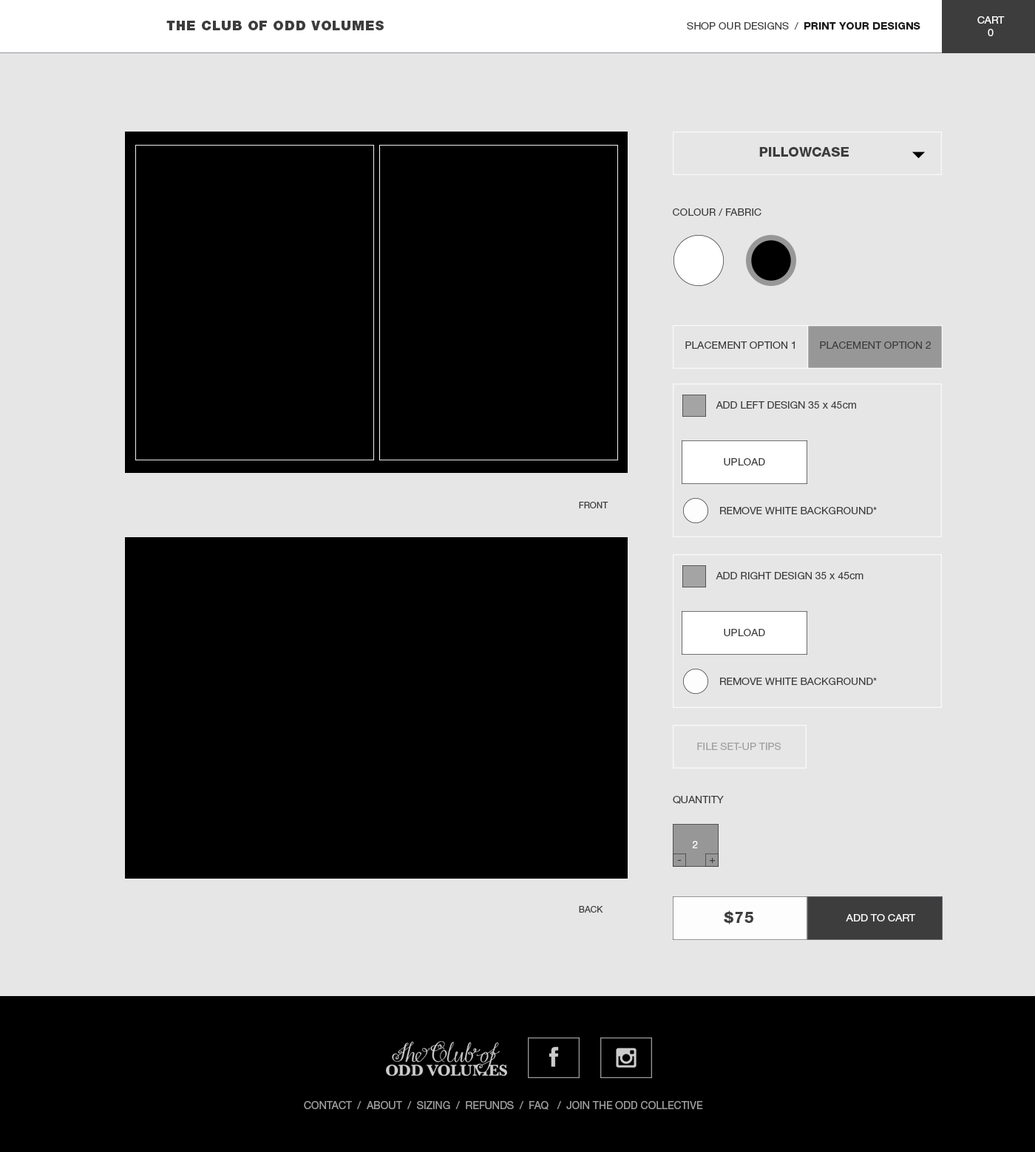
<style>
.page{position:relative;width:1035px;height:1152px;background:#e6e6e6}
.page>*{position:absolute;margin:0}
.t1{font:10.3px "HelveticaNeueLTStd-Roman";color:#ffffff}
.t2{font:13.3px "HelveticaNeueLTStd-Blk";letter-spacing:0.05em;color:#3d3d3d}
.t3{font:10.3px "HelveticaNeueLTStd-Roman";color:#3d3d3d}
.t4{font:10.3px "HelveticaNeueLTStd-Hv";color:#1b1b1b}
.t5{font:13.3px "HelveticaNeueLTStd-Hv";color:#3d3d3d}
.t6{font:10.3px "HelveticaNeueLTStd-Roman";color:#3e3e3e}
.t7{font:8.9px "HelveticaNeueLTStd-Roman";color:#3e3e3e}
.t8{font:10.3px "HelveticaNeueLTStd-Roman";color:#a0a0a0}
.t9{font:10.1px "HelveticaNeueLTStd-Roman";color:#ffffff}
.t10{font:10.1px "HelveticaNeueLTStd-Roman";color:#3e3e3e}
.t11{font:14.8px "HelveticaNeueLTStd-Hv";letter-spacing:0.05em;color:#3d3d3d}
.t12{font:10.3px "HelveticaNeueLTStd-Roman";color:#faf9f9}
.t13{font:10.6px "HelveticaNeueLTStd-Roman";color:#9b9b9b}
</style>
<div class="page">
<p class="t1" style="left:977px;top:16px;width:27px;height:20px;text-align:center">CART<br>0</p>
<p class="t2" style="left:166px;top:21px;width:218px;height:9px">THE CLUB OF ODD VOLUMES</p>
<p class="t3" style="left:687px;top:22px;width:233px;height:8px">SHOP OUR DESIGNS  /  <span class="t4">PRINT YOUR DESIGNS</span></p>
<p class="t5" style="left:759px;top:147px;width:90px;height:10px">PILLOWCASE</p>
<p class="t6" style="left:673px;top:208px;width:88px;height:8px">COLOUR / FABRIC</p>
<p class="t6" style="left:685px;top:341px;width:110px;height:8px">PLACEMENT OPTION 1</p>
<p class="t6" style="left:820px;top:341px;width:111px;height:8px">PLACEMENT OPTION 2</p>
<p class="t6" style="left:715px;top:401px;width:141px;height:8px">ADD LEFT DESIGN 35 x 45cm</p>
<p class="t6" style="left:724px;top:458px;width:41px;height:8px">UPLOAD</p>
<p class="t7" style="left:579px;top:502px;width:29px;height:7px">FRONT</p>
<p class="t6" style="left:720px;top:507px;width:157px;height:7px">REMOVE WHITE BACKGROUND*</p>
<p class="t6" style="left:715px;top:572px;width:148px;height:7px">ADD RIGHT DESIGN 35 x 45cm</p>
<p class="t6" style="left:724px;top:629px;width:41px;height:7px">UPLOAD</p>
<p class="t6" style="left:720px;top:678px;width:157px;height:7px">REMOVE WHITE BACKGROUND*</p>
<p class="t8" style="left:697px;top:743px;width:84px;height:7px">FILE SET-UP TIPS</p>
<p class="t6" style="left:673px;top:796px;width:51px;height:8px">QUANTITY</p>
<p class="t9" style="left:692px;top:841px;width:6px;height:8px">2</p>
<p class="t10" style="left:677px;top:860px;width:4px;height:1px">-</p>
<p class="t10" style="left:710px;top:858px;width:5px;height:5px">+</p>
<p class="t7" style="left:579px;top:906px;width:24px;height:7px">BACK</p>
<p class="t11" style="left:724px;top:911px;width:29px;height:14px">$75</p>
<p class="t12" style="left:846px;top:914px;width:69px;height:8px">ADD TO CART</p>
<p class="t13" style="left:304px;top:1101px;width:399px;height:9px">CONTACT  /  ABOUT  /  SIZING  /  REFUNDS  /  FAQ   /  JOIN THE ODD COLLECTIVE</p>
</div>
